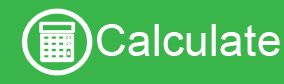
<style>
.page{position:relative;width:284px;height:84px;background:#39b549}
.page>*{position:absolute;margin:0}
.t1{font:43.8px "ArialMT";letter-spacing:0.01em;color:#ffffff}
</style>
<div class="page">
<p class="t1" style="left:97px;top:24px;width:183px;height:32px">Calculate</p>
</div>
